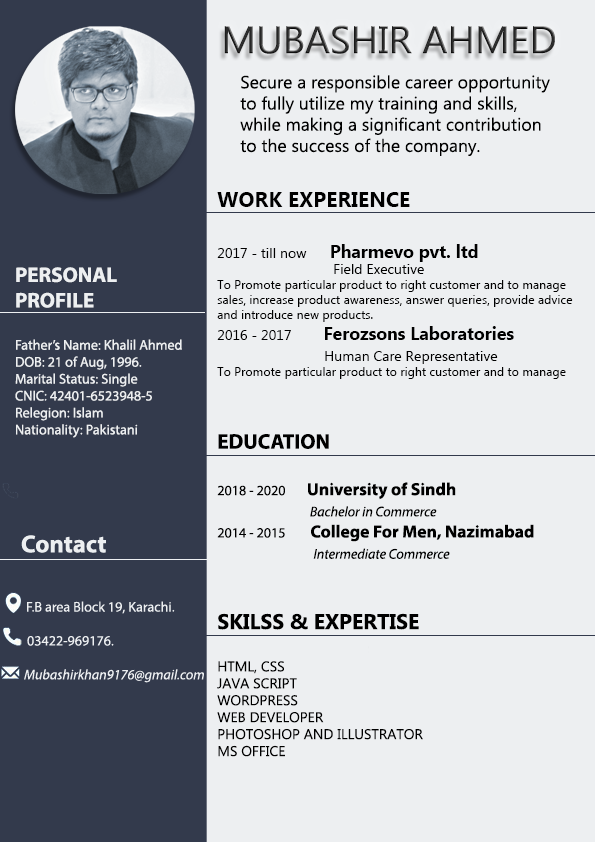
<style>
.page{position:relative;width:595px;height:842px;background:#edeff1}
.page>*{position:absolute;margin:0}
.t1{font:38.8px "MicrosoftNewTaiLue";color:#000000}
.t2{font:17.6px "MicrosoftNewTaiLue";color:#000000}
.t3{font:21.2px "MicrosoftNewTaiLue";color:#000000}
.t4{font:12.3px "MicrosoftNewTaiLue";color:#000000}
.t5{font:21.2px "MicrosoftNewTaiLue-Bold";color:#000000}
.t6{font:14.1px "MicrosoftNewTaiLue";color:#000000}
.t7{font:17.6px "MicrosoftNewTaiLue-Bold";color:#000000}
.t8{font:14.1px "MyriadPro-Regular";color:#eef0f2}
.t9{font:21.2px "MyriadPro-Bold";color:#eef0f2}
.t10{font:17.6px "MyriadPro-Bold";color:#000000}
.t11{font:21.2px "MyriadPro-Bold";color:#000000}
.t12{font:14.1px "MyriadPro-Regular";color:#000000}
.t13{font:14.1px "MyriadPro-It";color:#000000}
</style>
<div class="page">
<p class="t1" style="left:224px;top:25px;width:331px;height:29px">MUBASHIR AHMED</p>
<p class="t2" style="left:240px;top:75px;width:310px;height:81px"><span class="t3"><br></span>Secure a responsible career opportunity to fully utilize my training and skills, while making a significant contribution to the success of the company.</p>
<p class="t4" style="left:217px;top:192px;width:356px;height:187px"><span class="t5">WORK EXPERIENCE<br><br></span><span class="t6">2017 - till now    </span><span class="t7">Pharmevo pvt. ltd<br></span><span class="t6">                              Field Executive<br></span>To Promote particular product to right customer and to manage sales, increase product awareness, answer queries, provide advice and introduce new products.<br><span class="t6">2016 - 2017       </span><span class="t7"> Ferozsons Laboratories<br>                      </span><span class="t6">Human Care Representative<br></span>To Promote particular product to right customer and to manage sales, increase product awareness, answer queries, provide advice and introduce new products.</p>
<p class="t8" style="left:15px;top:267px;width:167px;height:171px"><span class="t9">PERSONAL PROFILE<br><br></span>Father’s Name: Khalil Ahmed<br>DOB: 21 of Aug, 1996.<br>Marital Status: Single<br>CNIC: 42401-6523948-5<br>Relegion: Islam<br>Nationality: Pakistani</p>
<p class="t10" style="left:217px;top:434px;width:317px;height:125px"><span class="t11">EDUCATION<br><br></span><span class="t12">2018 - 2020</span>      University of Sindh<br>                          <span class="t13">Bachelor in Commerce<br></span><span class="t12">2014 - 2015</span>       College For Men, Nazimabad<br>                           <span class="t13">Intermediate Commerce</span></p>
<p class="t6" style="left:217px;top:613px;width:206px;height:144px"><span class="t5">SKILSS &amp; EXPERTISE<br><br></span>HTML, CSS<br>JAVA SCRIPT<br>WORDPRESS<br>WEB DEVELOPER<br>PHOTOSHOP AND ILLUSTRATOR<br>MS OFFICE</p>
</div>
